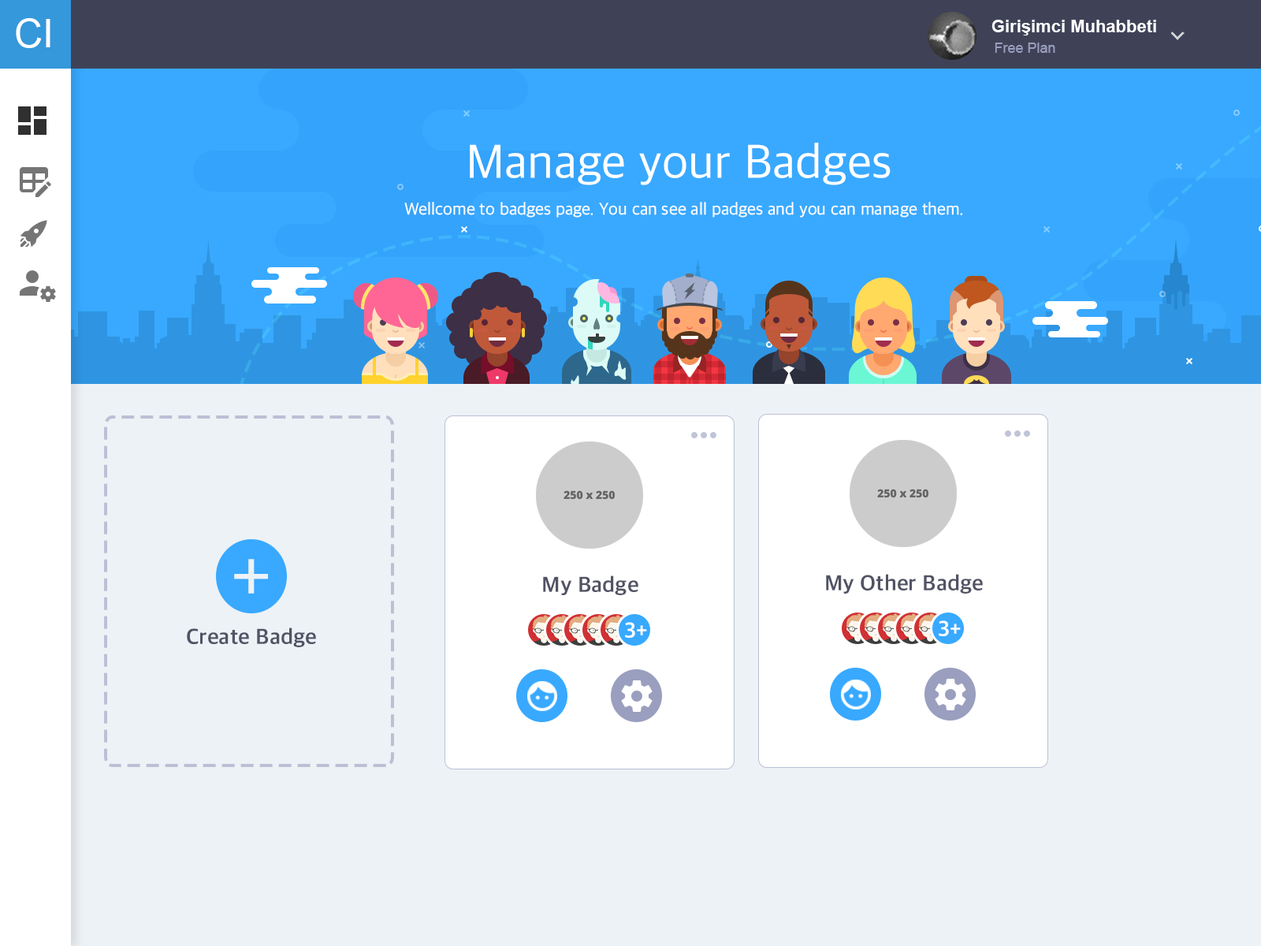
<style>
.page{position:relative;width:1261px;height:946px;background:#edf2f6}
.page>*{position:absolute;margin:0}
.t1{font:39.4px "ArialMT";color:#ffffff}
.t2{font:17.3px "Arial-BoldMT";color:#ffffff}
.t3{font:14.2px "ArialMT";color:#9a9fbf}
.t4{font:48.9px "AppleSDGothicNeo-Regular";color:#ffffff}
.t5{font:17.3px "AppleSDGothicNeo-Regular";color:#ffffff}
.t6{font:75.2px "AppleSDGothicNeo-Regular";color:#edf2f6}
.t7{font:22.1px "AppleSDGothicNeo-Bold";color:#515365}
.t8{font:22.1px "AppleSDGothicNeo-Bold";color:#ffffff}
</style>
<div class="page">
<p class="t1" style="left:16px;top:18px;width:34px;height:30px">CI</p>
<p class="t2" style="left:991px;top:20px;width:165px;height:15px">Girişimci Muhabbeti</p>
<p class="t3" style="left:995px;top:43px;width:60px;height:10px">Free Plan</p>
<p class="t4" style="left:470px;top:143px;width:421px;height:42px">Manage your Badges</p>
<p class="t5" style="left:404px;top:202px;width:558px;height:16px">Wellcome to badges page. You can see all padges and you can manage them.</p>
<p class="t6" style="left:234px;top:559px;width:34px;height:34px">+</p>
<p class="t7" style="left:543px;top:575px;width:95px;height:20px">My Badge</p>
<p class="t7" style="left:826px;top:574px;width:157px;height:19px">My Other Badge</p>
<p class="t7" style="left:187px;top:627px;width:129px;height:20px">Create Badge</p>
<p class="t8" style="left:625px;top:622px;width:22px;height:16px">3+</p>
<p class="t8" style="left:939px;top:620px;width:22px;height:17px">3+</p>
</div>
